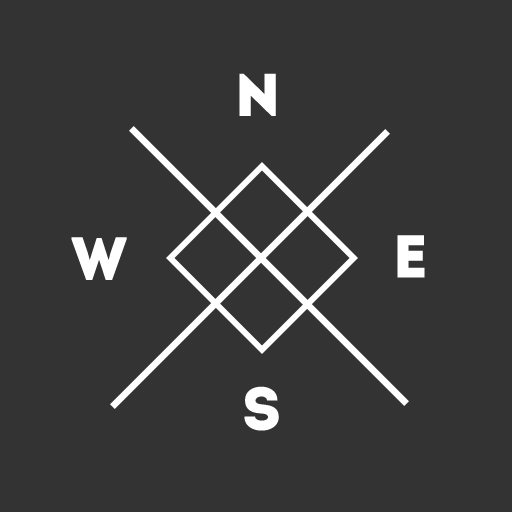
<style>
.page{position:relative;width:512px;height:512px;background:#333333}
.page>*{position:absolute;margin:0}
.t1{font:60px "Intro";color:#ffffff}
</style>
<div class="page">
<p class="t1" style="left:239px;top:73px;width:37px;height:43px">N</p>
<p class="t1" style="left:71px;top:237px;width:56px;height:43px">W</p>
<p class="t1" style="left:397px;top:235px;width:28px;height:43px">E</p>
<p class="t1" style="left:244px;top:386px;width:35px;height:45px">S</p>
</div>
